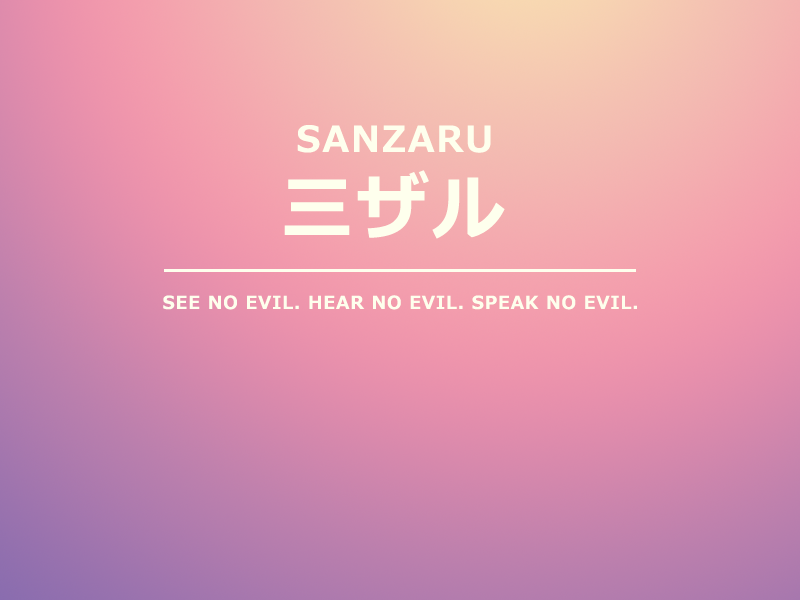
<style>
.page{position:relative;width:800px;height:600px}
.page>*{position:absolute;margin:0}
.t1{font:36px "Meiryo-Bold";letter-spacing:0.05em;color:#feffed}
.t2{font:72px "Meiryo-Bold";letter-spacing:0.05em;color:#feffed}
.t3{font:18px "Meiryo-Bold";letter-spacing:0.05em;color:#feffed}
</style>
<div class="page">
<p class="t1" style="left:297px;top:125px;width:194px;height:28px">SANZARU</p>
<p class="t2" style="left:284px;top:170px;width:221px;height:69px">三ザル</p>
<p class="t3" style="left:163px;top:295px;width:474px;height:15px">SEE NO EVIL. HEAR NO EVIL. SPEAK NO EVIL.</p>
</div>
